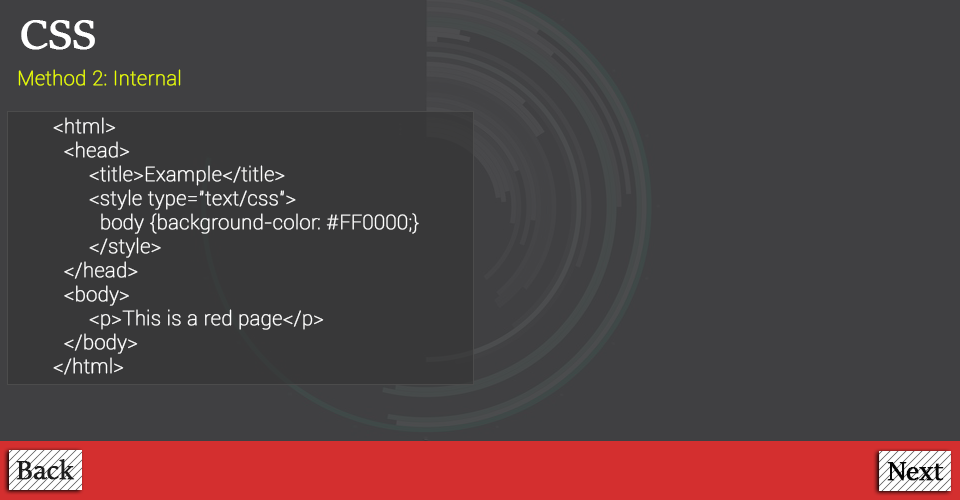
<style>
.page{position:relative;width:960px;height:500px;background:#404042}
.page>*{position:absolute;margin:0}
.t1{font:48px "SitkaBanner";color:#ffffff;font-weight:bold}
.t2{font:20px "Roboto-Thin";color:#ffffff;font-weight:bold}
.t3{font:20px "Roboto-Thin";color:#eaff00;font-weight:bold}
.t4{font:30px "SitkaBanner";color:#1e1e1e;font-weight:bold}
.t5{font:30px "SitkaBanner";color:#060606;font-weight:bold}
</style>
<div class="page">
<p class="t1" style="left:21px;top:20px;width:74px;height:30px">CSS</p>
<p class="t2" style="left:18px;top:69px;width:401px;height:306px"><span class="t3">Method 2: Internal<br><br></span> &lt;html&gt;<br>   &lt;head&gt;<br>  &lt;title&gt;Example&lt;/title&gt;<br>  &lt;style type="text/css"&gt;<br>    body {background-color: #FF0000;}<br>  &lt;/style&gt;<br>   &lt;/head&gt;<br>   &lt;body&gt;<br>  &lt;p&gt;This is a red page&lt;/p&gt;<br>   &lt;/body&gt;<br> &lt;/html&gt;<br> <br>Method 3: External (link to a style sheet)<br> &lt;html&gt;<br>   &lt;head&gt;<br>  &lt;title&gt;My document&lt;/title&gt;<br>  &lt;link rel="stylesheet" type="text/css" href="style/style.css" /&gt;<br>   &lt;/head&gt;<br>   &lt;body&gt;</p>
<p class="t4" style="left:16px;top:459px;width:59px;height:21px">Back</p>
<p class="t5" style="left:887px;top:462px;width:57px;height:19px">Next</p>
</div>
